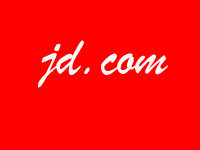
<style>
.page{position:relative;width:200px;height:150px;background:#ff0000}
.page>*{position:absolute;margin:0}
.t1{font:58.3px "STXingkai";color:#f7f9fa}
</style>
<div class="page">
<p class="t1" style="left:38px;top:40px;width:130px;height:48px">jd.com</p>
</div>
